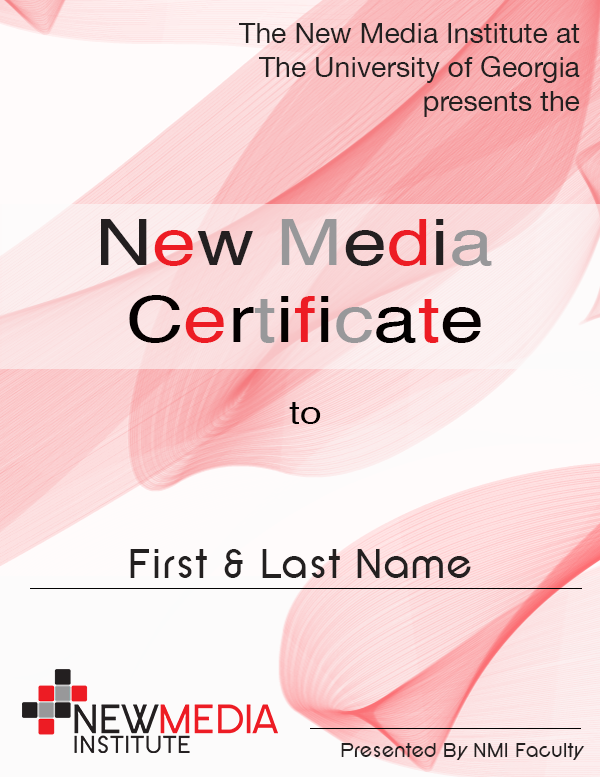
<style>
.page{position:relative;width:600px;height:777px}
.page>*{position:absolute;margin:0}
.t1{font:28.4px "HelveticaNeue";color:#232020}
.t2{font:31.4px "Helvetica";color:#030000;scale:1.24 1}
.t3{font:64px "Helvetica";color:#231f20;scale:1.24 1}
.t4{font:64px "Helvetica";color:#ed1c24;scale:1.24 1}
.t5{font:64px "Helvetica";color:#98989a;scale:1.24 1}
.t6{font:64px "Helvetica";color:#040000;scale:1.24 1}
.t7{font:64px "Helvetica";color:#020000;scale:1.24 1}
.t8{font:64px "Helvetica";color:#070000;scale:1.24 1}
.t9{font:43.8px "SFNewRepublic";color:#232020}
.t10{font:20.5px "SFNewRepublic";color:#232020}
</style>
<div class="page">
<p class="t1" style="left:239px;top:23px;width:341px;height:94px;text-align:right">The New Media Institute at<br>The University of Georgia<br>presents the</p>
<p class="t2" style="left:101px;top:219px;width:391px;height:205px;text-align:center"><span class="t3">N</span><span class="t4">e</span><span class="t3">w </span><span class="t5">M</span><span class="t3">e</span><span class="t4">d</span><span class="t3">i</span><span class="t5">a <br></span><span class="t6">C</span><span class="t4">e</span><span class="t6">r</span><span class="t5">t</span><span class="t6">i</span><span class="t4">f</span><span class="t6">i</span><span class="t5">c</span><span class="t7">a</span><span class="t4">t</span><span class="t8">e<br><br><br></span>to</p>
<p class="t9" style="left:130px;top:549px;width:341px;height:29px">First &amp; Last Name</p>
<p class="t10" style="left:341px;top:743px;width:244px;height:17px">Presented By NMI Faculty</p>
</div>
